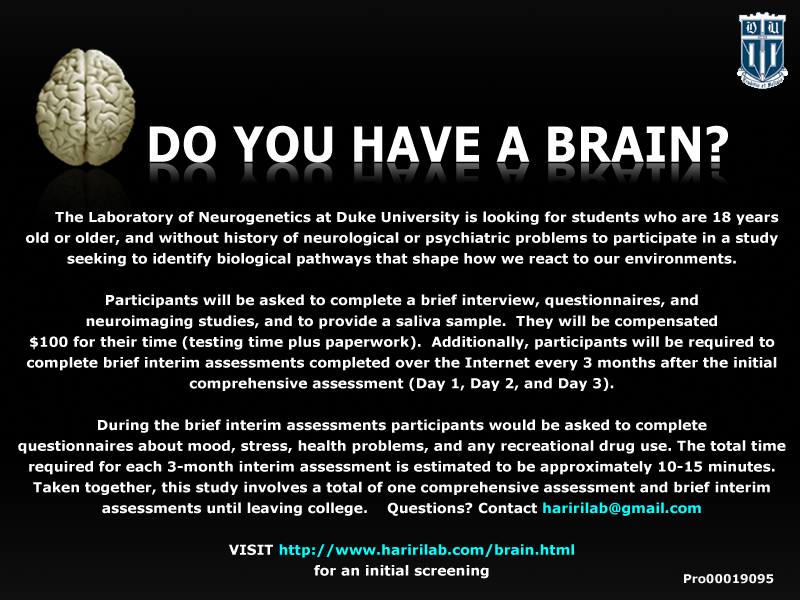
<style>
.page{position:relative;width:800px;height:600px;background:#000000}
.page>*{position:absolute;margin:0}
.t1{font:48.5px "Verdana-Bold";color:#ffffff;scale:0.89 1}
.t2{font:40.4px "Verdana-Bold";scale:1.06 1}
.t3{font:13.9px/20.8px "Verdana-Bold";color:#ffffff}
.t4{font:16.2px/20.8px "Verdana-Bold";color:#ffffff}
.t5{font:13.9px/20.8px "Verdana-Bold";color:#00ffff}
.t6{font:12px "Verdana-Bold";color:#f8f8fc}
</style>
<div class="page">
<p class="t1" style="left:149px;top:125px;width:579px;height:38px">DO YOU HAVE A BRAIN?</p>
<p class="t2" style="left:149px;top:162px;width:579px;height:32px">DO YOU HAVE A BRAIN?</p>
<p class="t3" style="left:18px;top:211px;width:768px;height:368px;text-align:center"><span class="t4">    </span>The Laboratory of Neurogenetics at Duke University is looking for students who are 18 years old or older, and without history of neurological or psychiatric problems to participate in a study seeking to identify biological pathways that shape how we react to our environments.<br><br>Participants will be asked to complete a brief interview, questionnaires, and <br>neuroimaging studies, and to provide a saliva sample.  They will be compensated <br>$100 for their time (testing time plus paperwork).  Additionally, participants will be required to complete brief interim assessments completed over the Internet every 3 months after the initial comprehensive assessment (Day 1, Day 2, and Day 3). <br><br>During the brief interim assessments participants would be asked to complete <br>questionnaires about mood, stress, health problems, and any recreational drug use. The total time required for each 3-month interim assessment is estimated to be approximately 10-15 minutes. Taken together, this study involves a total of one comprehensive assessment and brief interim assessments until leaving college.    Questions? Contact <span class="t5">haririlab@gmail.com<br><br></span>VISIT<span class="t5"> http://www.haririlab.com/brain.html <br></span>for an initial screening</p>
<p class="t6" style="left:684px;top:574px;width:90px;height:10px">Pro00019095</p>
</div>
